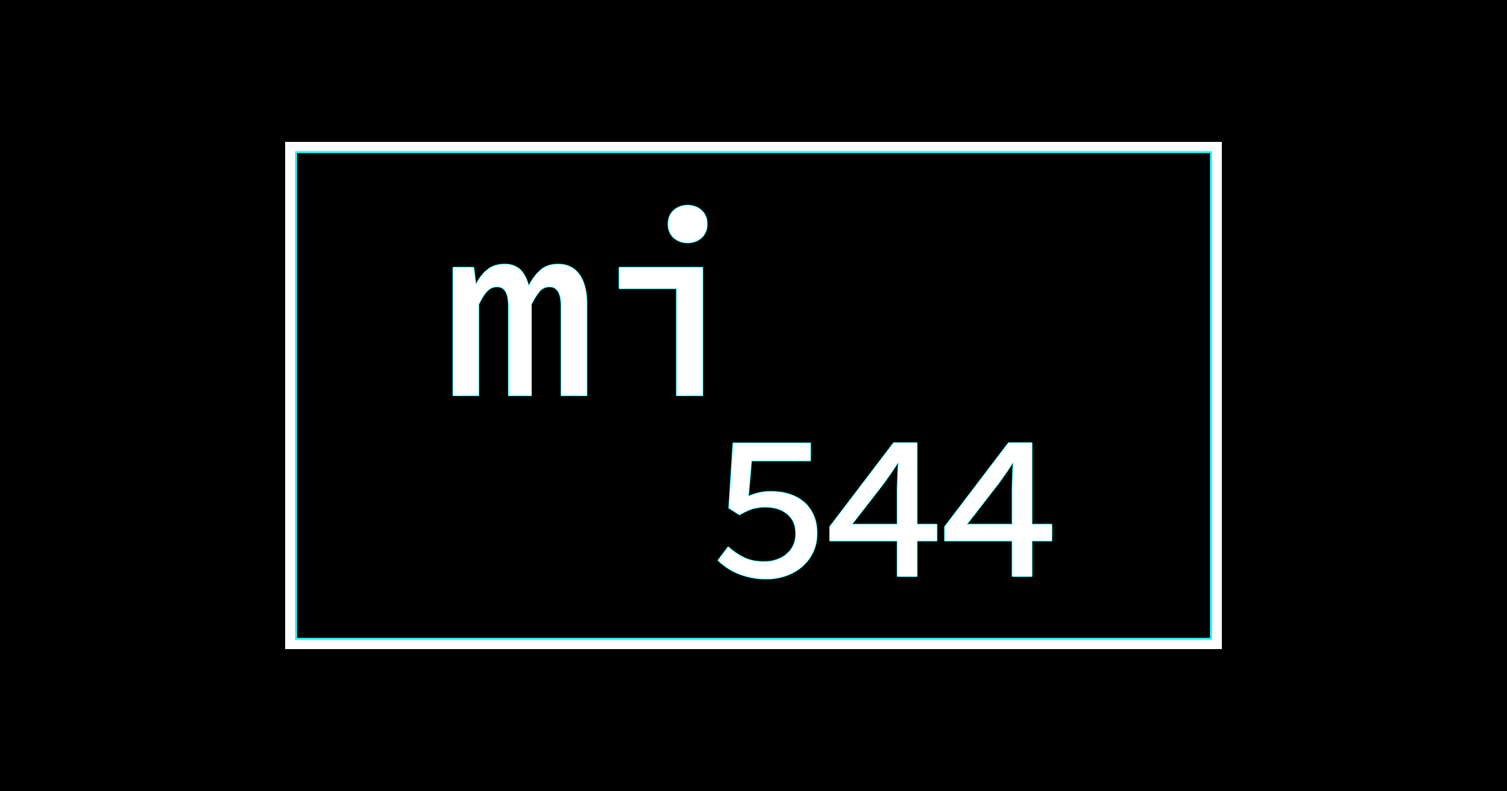
<style>
.page{position:relative;width:1507px;height:791px;background:#000000}
.page>*{position:absolute;margin:0}
.t1{font:261.6px "SourceCodePro-Medium";color:#ffffff}
.t2{font:209.3px "SourceCodePro-Medium";letter-spacing:-0.05em;color:#ffffff}
</style>
<div class="page">
<p class="t1" style="left:453px;top:205px;width:254px;height:191px">mi</p>
<p class="t2" style="left:718px;top:443px;width:334px;height:136px">544</p>
</div>
